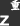
<style>
.page{position:relative;width:20px;height:26px;background:#333333}
.page>*{position:absolute;margin:0}
.t1{font:12px "DFKaiShu-SB-Estd-BF";color:#ffffff;font-weight:bold}
.t2{font:18px "ArialMT";color:#ffffff;font-weight:bold}
</style>
<div class="page">
<p class="t1" style="left:10px;top:0px;width:11px;height:11px">重</p>
<p class="t2" style="left:0px;top:15px;width:9px;height:11px">z</p>
</div>
